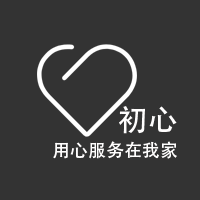
<style>
.page{position:relative;width:200px;height:200px;background:#333333}
.page>*{position:absolute;margin:0}
.t1{font:30px "AdobeHeitiStd-Regular";color:#fffefe}
.t2{font:18px "AdobeHeitiStd-Regular";color:#fffefe}
</style>
<div class="page">
<p class="t1" style="left:119px;top:106px;width:58px;height:28px">初心</p>
<p class="t2" style="left:53px;top:141px;width:124px;height:18px">用心服务在我家</p>
</div>
